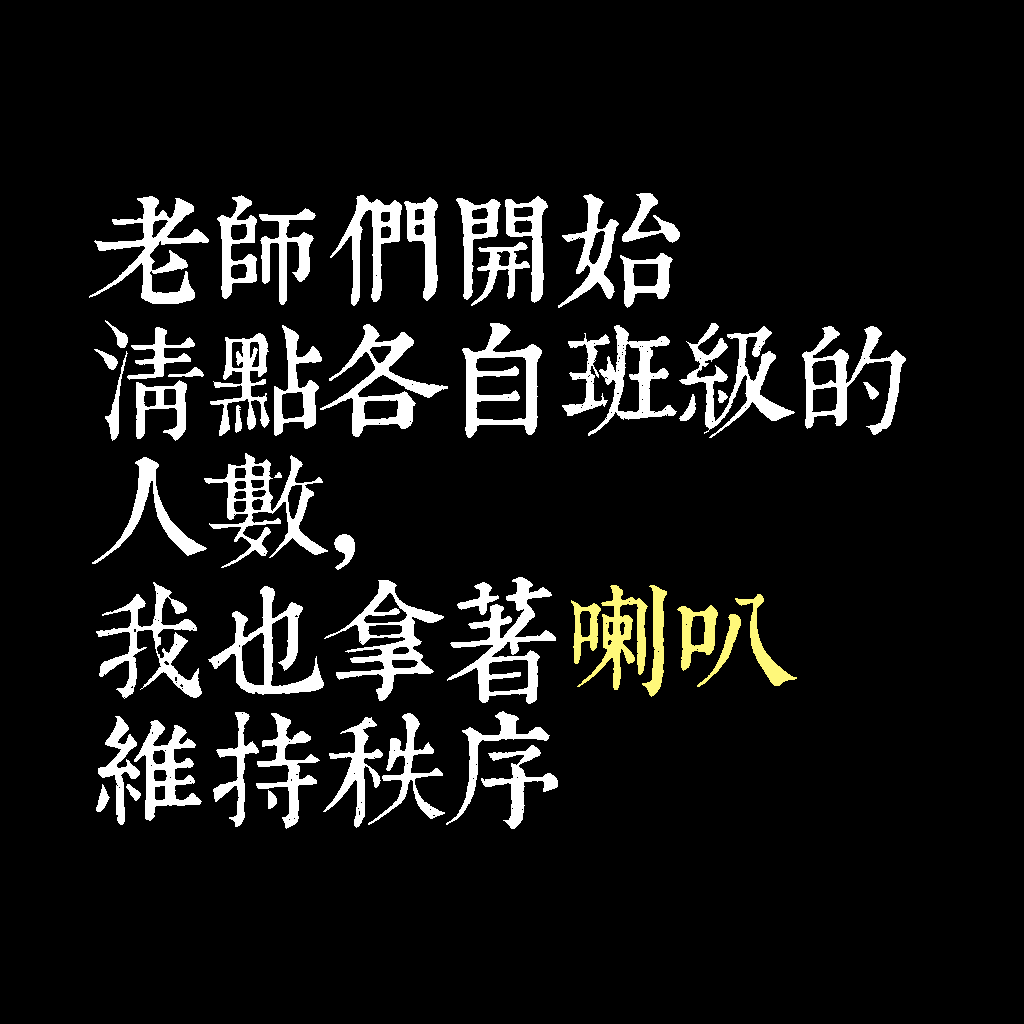
<style>
.page{position:relative;width:1024px;height:1024px;background:#000000}
.page>*{position:absolute;margin:0}
.t1{font:120px/130px "TpldKhangXiDictTrial";letter-spacing:-0.02em;color:#ffffff}
.t2{font:120px/130px "TpldKhangXiDictTrial";letter-spacing:-0.02em;color:#fff87a}
</style>
<div class="page">
<p class="t1" style="left:89px;top:193px;width:817px;height:636px">老師們開始<br>清點各自班級的<br>人數，<br>我也拿著<span class="t2">喇叭<br></span>維持秩序</p>
</div>
